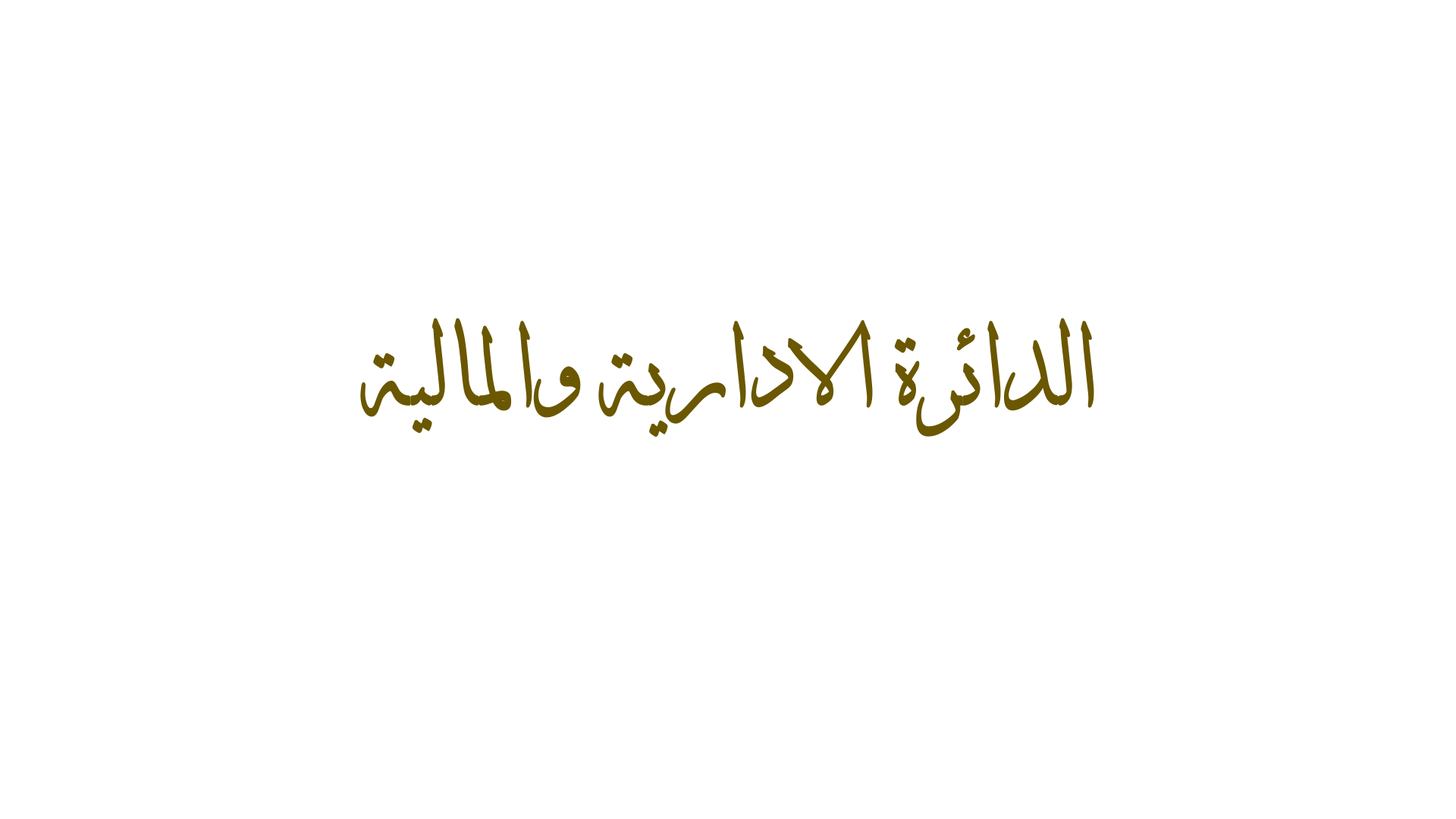
<style>
.page{position:relative;width:1456px;height:819px;background:#ffffff}
.page>*{position:absolute;margin:0}
.t1{font:108.3px "DecoTypeThuluth";color:#6a5700;font-weight:bold;scale:0.89 1}
</style>
<div class="page">
<p class="t1" style="left:360px;top:318px;width:734px;height:119px">الدائرة الادارية والمالية</p>
</div>
